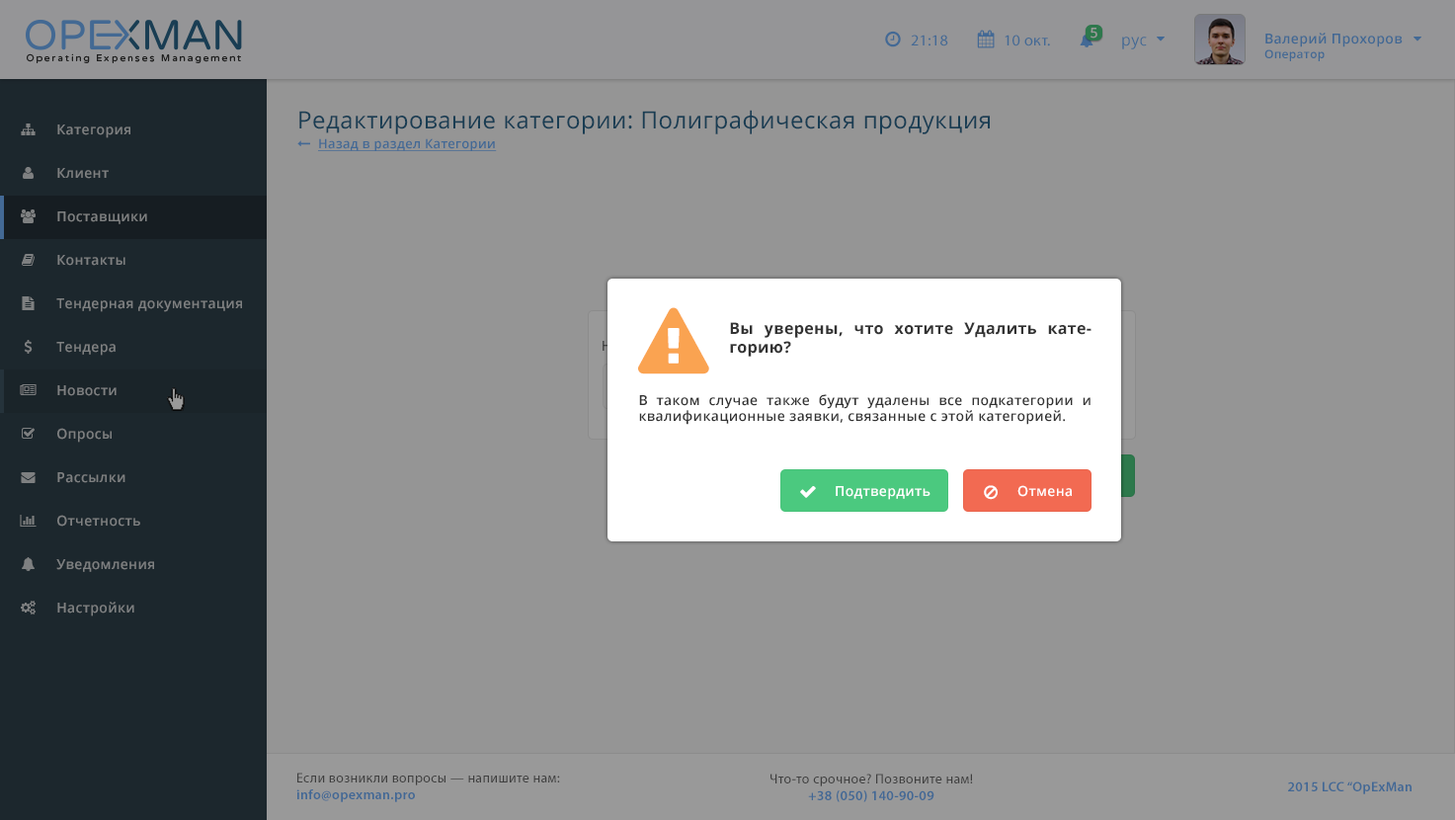
<style>
.page{position:relative;width:1455px;height:820px;background:#959595}
.page>*{position:absolute;margin:0}
.t1{font:13.8px "OpenSans-Semibold";letter-spacing:0.025em;color:#999999}
.t2{font:15.7px "MyriadPro-Regular";letter-spacing:0.025em;color:#436995}
.t3{font:15.7px "OpenSans";letter-spacing:0.025em;color:#426995}
.t4{font:13.8px "OpenSans-Semibold";letter-spacing:0.025em;color:#426894}
.t5{font:11.8px "OpenSans-Semibold";letter-spacing:0.025em;color:#426894}
.t6{font:23.6px "OpenSans";letter-spacing:0.025em;color:#193d53}
.t7{font:13.8px "OpenSans-Semibold";letter-spacing:0.025em;color:#7e8081}
.t8{font:12.8px "OpenSans-Semibold";letter-spacing:0.025em;color:#436995;text-decoration:underline}
.t9{font:15.7px "OpenSans-Bold";letter-spacing:0.025em;color:#333333}
.t10{font:13.8px "OpenSans-Semibold";letter-spacing:0.025em;color:#333333}
.t11{font:13.8px "OpenSans-Semibold";letter-spacing:0.025em;color:#ffffff}
.t12{font:13.8px "MyriadPro-Regular";letter-spacing:0.025em}
.t13{font:13.8px "MyriadPro-Semibold";letter-spacing:0.025em}
.t14{font:13.8px "MyriadPro-Semibold";letter-spacing:0.025em;color:#426895}
</style>
<div class="page">
<p class="t1" style="left:1090px;top:28px;width:7px;height:11px">5</p>
<p class="t2" style="left:911px;top:35px;width:37px;height:11px">21:18</p>
<p class="t2" style="left:1004px;top:35px;width:46px;height:11px">10 окт.</p>
<p class="t3" style="left:1122px;top:37px;width:25px;height:12px">рус</p>
<p class="t4" style="left:1264px;top:33px;width:138px;height:28px">Валерий Прохоров<br><span class="t5">Оператор</span></p>
<p class="t6" style="left:299px;top:110px;width:691px;height:24px">Редактирование категории: Полиграфическая продукция</p>
<p class="t7" style="left:57px;top:124px;width:73px;height:14px">Категория</p>
<p class="t8" style="left:318px;top:138px;width:179px;height:13px">Назад в раздел Категории</p>
<p class="t7" style="left:57px;top:168px;width:52px;height:11px">Клиент</p>
<p class="t7" style="left:57px;top:211px;width:90px;height:13px">Поставщики</p>
<p class="t7" style="left:57px;top:255px;width:68px;height:11px">Контакты</p>
<p class="t7" style="left:56px;top:298px;width:186px;height:14px">Тендерная документация</p>
<p class="t9" style="left:730px;top:322px;width:361px;height:35px;text-align:justify">Вы уверены, что хотите Удалить кате- горию?</p>
<p class="t7" style="left:56px;top:342px;width:60px;height:14px">Тендера</p>
<p class="t7" style="left:57px;top:385px;width:60px;height:11px">Новости</p>
<p class="t10" style="left:639px;top:394px;width:451px;height:31px;text-align:justify">В таком случае также будут удалены все подкатегории и квалификационные заявки, связанные с этой категорией.</p>
<p class="t7" style="left:57px;top:428px;width:55px;height:14px">Опросы</p>
<p class="t7" style="left:57px;top:472px;width:68px;height:11px">Рассылки</p>
<p class="t11" style="left:836px;top:486px;width:94px;height:14px">Подтвердить</p>
<p class="t11" style="left:1017px;top:485px;width:55px;height:12px">Отмена</p>
<p class="t7" style="left:57px;top:515px;width:83px;height:11px">Отчетность</p>
<p class="t7" style="left:56px;top:559px;width:98px;height:13px">Уведомления</p>
<p class="t7" style="left:57px;top:601px;width:77px;height:15px">Настройки</p>
<p class="t12" style="left:296px;top:772px;width:264px;height:30px">Если возникли вопросы — напишите нам:<br><span class="t13">info@opexman.pro</span></p>
<p class="t12" style="left:770px;top:773px;width:203px;height:29px;text-align:center">Что-то срочное? Позвоните нам!<br><span class="t13">+38 (050) 140-90-09</span></p>
<p class="t14" style="left:1288px;top:781px;width:123px;height:13px">2015 LCC “OpExMan</p>
</div>
